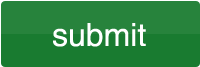
<style>
.page{position:relative;width:200px;height:67px;background:#27833c}
.page>*{position:absolute;margin:0}
.t1{font:32px "Helvetica";color:#ffffff}
</style>
<div class="page">
<p class="t1" style="left:53px;top:23px;width:93px;height:24px">submit</p>
</div>
